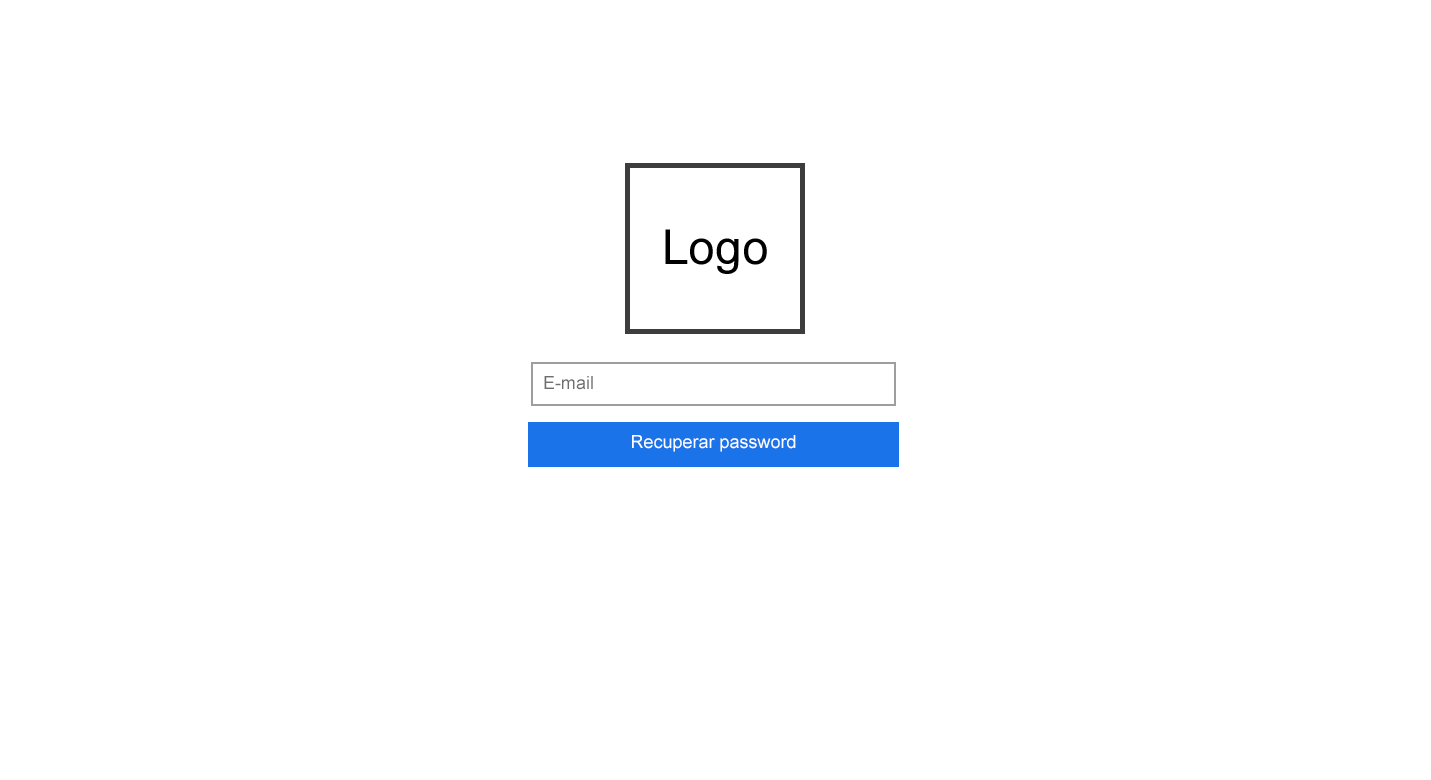
<style>
.page{position:relative;width:1431px;height:780px;background:#ffffff}
.page>*{position:absolute;margin:0}
.t1{font:18px "ArialMT";color:#6e6e6e}
.t2{font:18px "ArialMT";color:#ffffff}
</style>
<div class="page">
<p class="t1" style="left:544px;top:376px;width:49px;height:14px">E-mail</p>
<p class="t2" style="left:632px;top:435px;width:164px;height:17px">Recuperar password</p>
</div>
